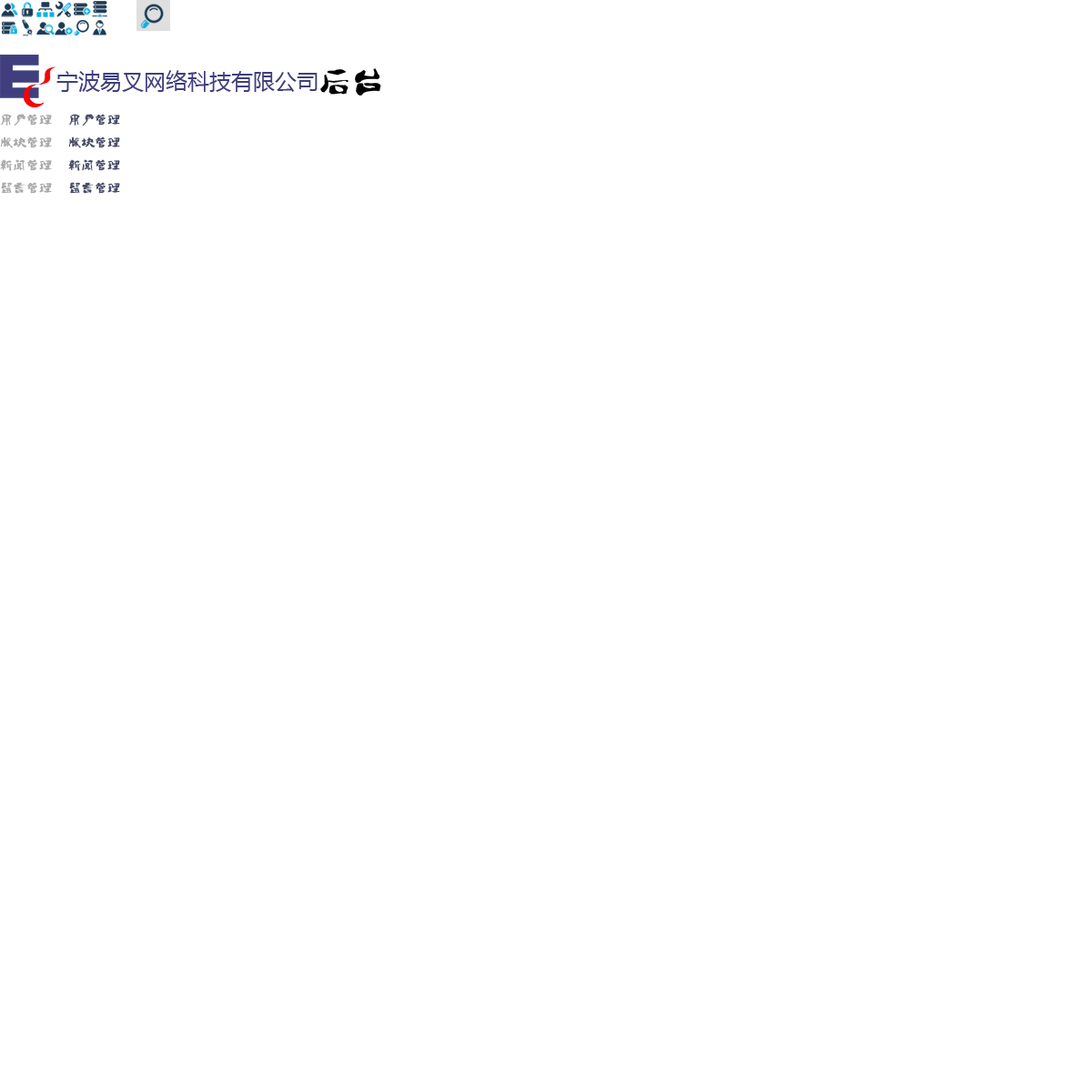
<style>
.page{position:relative;width:1092px;height:1092px;background:#ffffff}
.page>*{position:absolute;margin:0}
.t1{font:12.7px/22.7px "3500-";color:#aaaaaa;font-weight:bold}
.t2{font:12.7px/22.7px "3500-";color:#484d6a;font-weight:bold}
</style>
<div class="page">
<p class="t1" style="left:0px;top:114px;width:52px;height:80px">用户管理<br>版块管理<br>新闻管理<br>留言管理</p>
<p class="t2" style="left:68px;top:114px;width:52px;height:80px">用户管理<br>版块管理<br>新闻管理<br>留言管理</p>
</div>
